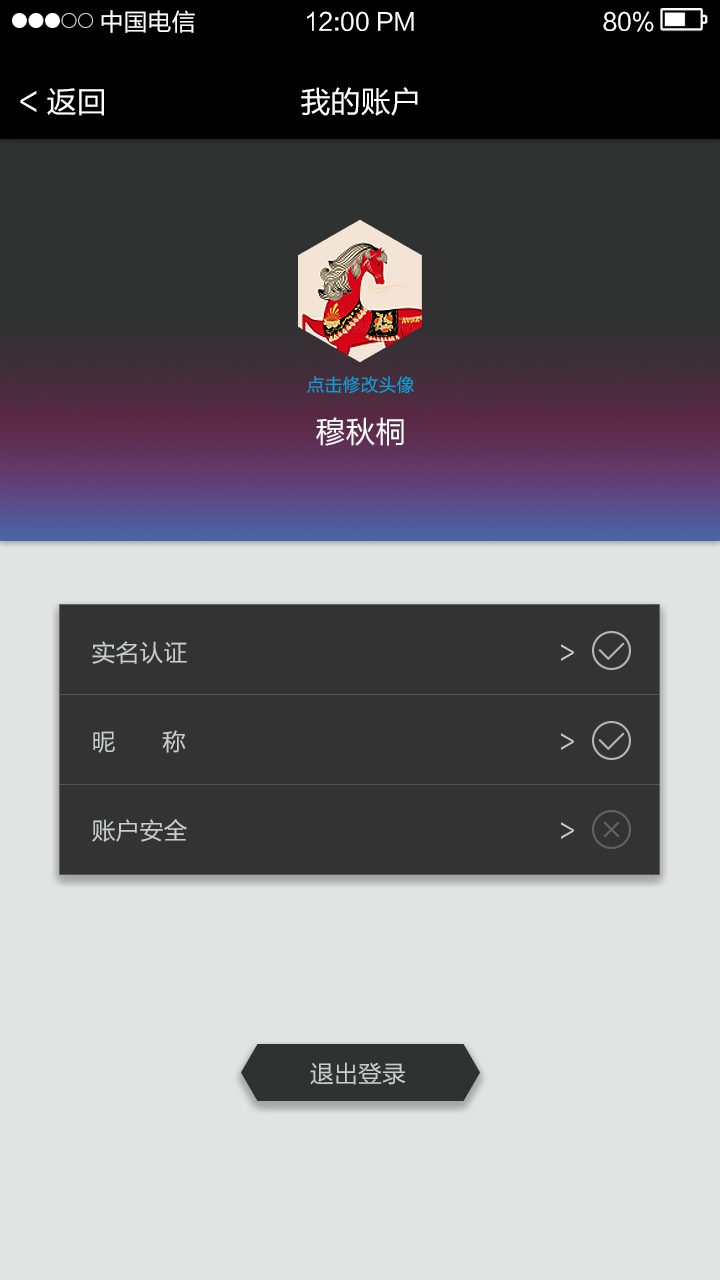
<style>
.page{position:relative;width:720px;height:1280px;background:#e2e4e4}
.page>*{position:absolute;margin:0}
.t1{font:24px "FZLTHK--GBK1-0";color:#ffffff}
.t2{font:30px "FZLTHK--GBK1-0";color:#ffffff}
.t3{font:18px "FZLTHK--GBK1-0";color:#00a3db}
.t4{font:24px/89px "FZLTHK--GBK1-0";color:#c9cccb}
.t5{font:24px "FZLTHK--GBK1-0";color:#c9cccb}
</style>
<div class="page">
<p class="t1" style="left:101px;top:10px;width:94px;height:23px">中国电信</p>
<p class="t1" style="left:307px;top:11px;width:107px;height:20px">12:00 PM</p>
<p class="t1" style="left:603px;top:11px;width:51px;height:21px">80%</p>
<p class="t2" style="left:20px;top:88px;width:84px;height:28px">&lt; 返回</p>
<p class="t2" style="left:301px;top:87px;width:117px;height:29px">我的账户</p>
<p class="t3" style="left:307px;top:376px;width:107px;height:18px">点击修改头像</p>
<p class="t2" style="left:316px;top:417px;width:88px;height:29px">穆秋桐</p>
<p class="t4" style="left:92px;top:641px;width:482px;height:201px">实名认证           &gt;<br>昵       称           &gt;<br>账户安全           &gt;</p>
<p class="t5" style="left:310px;top:1062px;width:96px;height:23px">退出登录</p>
</div>
